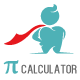
<style>
.page{position:relative;width:80px;height:80px;background:#ffffff}
.page>*{position:absolute;margin:0}
.t1{font:12.6px "Kenzo";letter-spacing:0.025em;color:#6a6a6a}
.t2{font:28.6px "MinionPro-Bold";letter-spacing:-0.015em;color:#4eb1b6}
</style>
<div class="page">
<p class="t1" style="left:3px;top:60px;width:74px;height:14px"><span class="t2">π </span>calculator</p>
</div>
